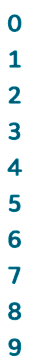
<style>
.page{position:relative;width:32px;height:360px;background:#ffffff}
.page>*{position:absolute;margin:0}
.t1{font:23px "Binggrae-Bold";color:#005573}
</style>
<div class="page">
<p class="t1" style="left:7px;top:14px;width:15px;height:19px">0</p>
<p class="t1" style="left:9px;top:50px;width:12px;height:18px">1</p>
<p class="t1" style="left:8px;top:86px;width:13px;height:18px">2</p>
<p class="t1" style="left:8px;top:122px;width:13px;height:19px">3</p>
<p class="t1" style="left:7px;top:158px;width:16px;height:18px">4</p>
<p class="t1" style="left:8px;top:194px;width:13px;height:19px">5</p>
<p class="t1" style="left:8px;top:230px;width:14px;height:19px">6</p>
<p class="t1" style="left:8px;top:266px;width:13px;height:18px">7</p>
<p class="t1" style="left:8px;top:302px;width:14px;height:19px">8</p>
<p class="t1" style="left:8px;top:338px;width:14px;height:19px">9</p>
</div>
